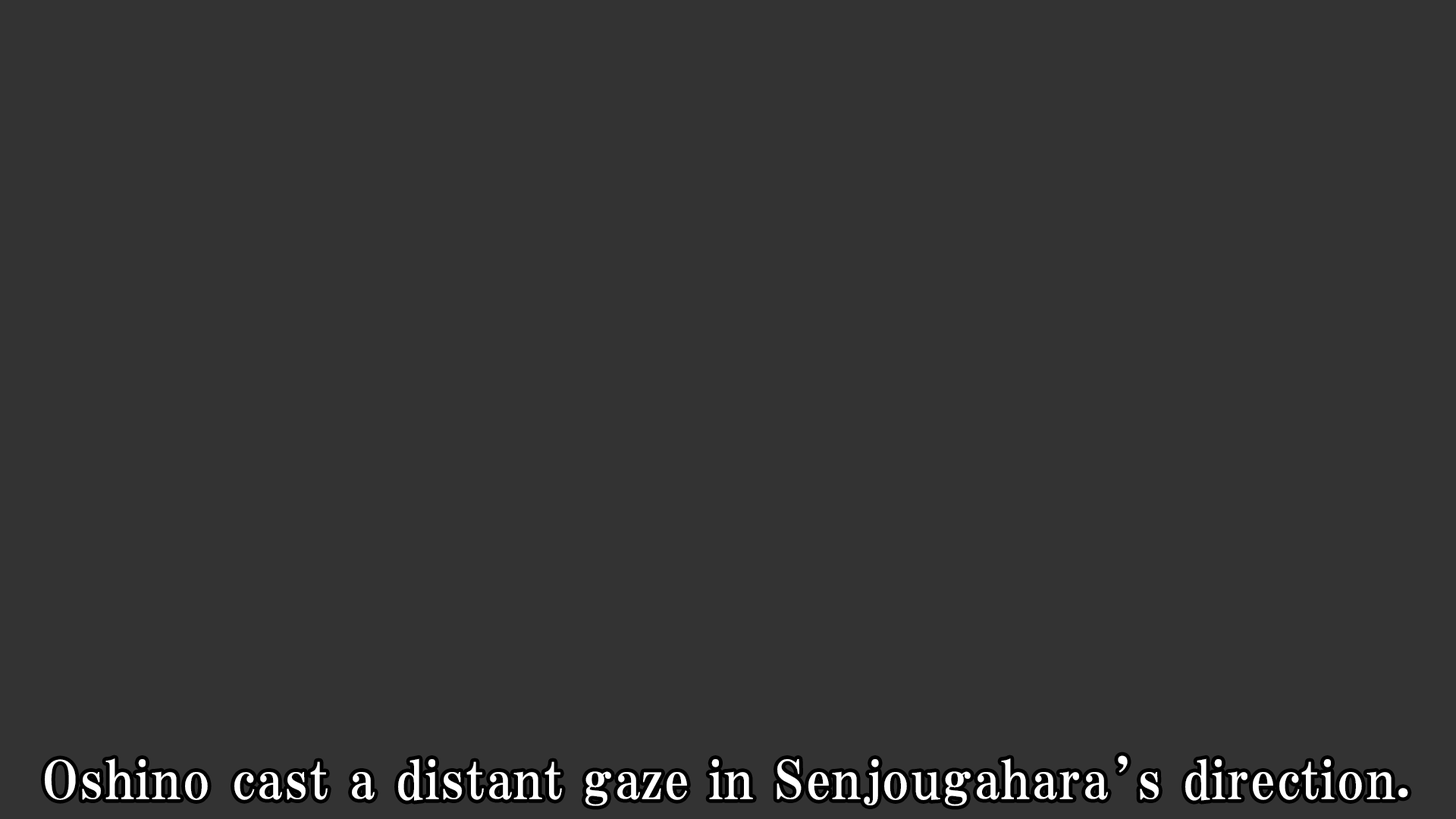
<style>
.page{position:relative;width:1456px;height:819px;background:#333333}
.page>*{position:absolute;margin:0}
.t1{font:53.1px "HGPMinchoE";letter-spacing:0.025em;color:#ffffff}
</style>
<div class="page">
<p class="t1" style="left:45px;top:755px;width:1363px;height:51px">Oshino cast a distant gaze in Senjougahara’s direction.</p>
</div>
